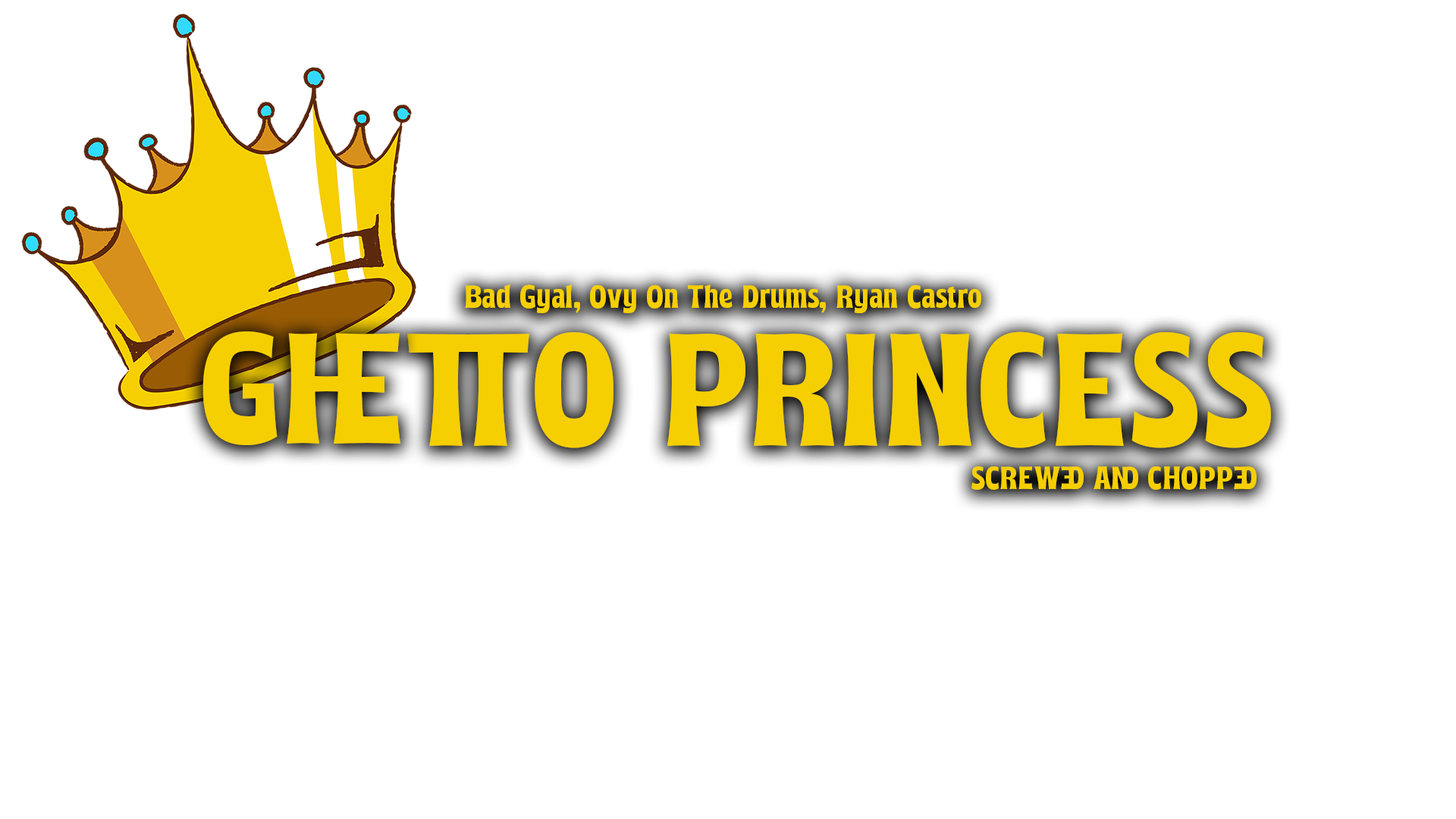
<style>
.page{position:relative;width:1456px;height:819px;background:#ffffff}
.page>*{position:absolute;margin:0}
.t1{font:29.1px "Mindsight-Regular";color:#f6cf02}
.t2{font:143.2px "Mindsight-Regular";color:#f6cf02}
.t3{font:145.4px "Mindsight-Regular";color:#f6cf02}
</style>
<div class="page">
<p class="t1" style="left:465px;top:284px;width:516px;height:29px">Bad Gyal, Ovy On The Drums, Ryan Castro</p>
<p class="t2" style="left:202px;top:331px;width:198px;height:114px">GHE</p>
<p class="t3" style="left:407px;top:331px;width:864px;height:117px">TTO PRINCESS</p>
<p class="t1" style="left:971px;top:466px;width:286px;height:24px">SCREWED AND CHOPPED</p>
</div>
